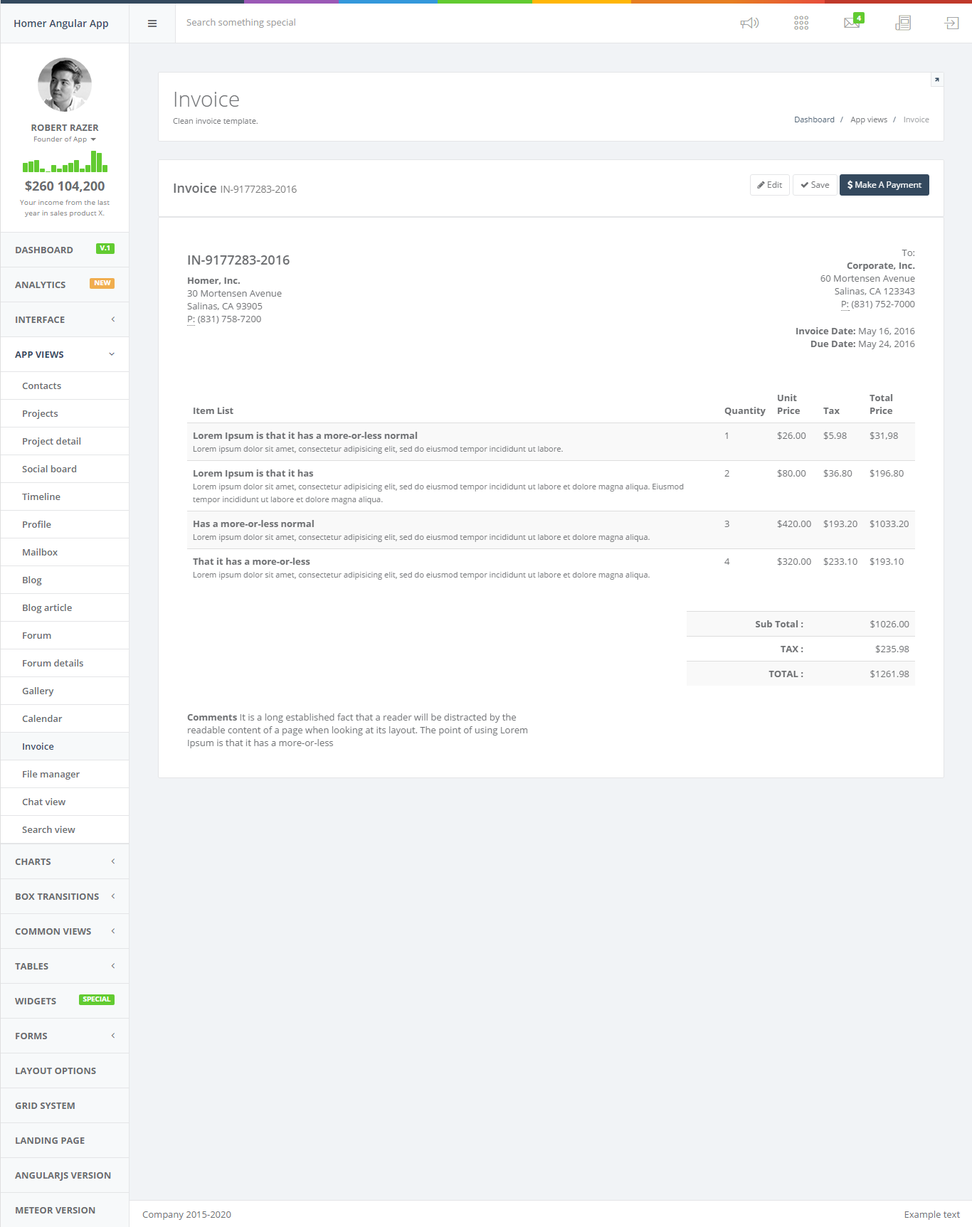
<style>
.page{position:relative;width:972px;height:1227px;background:#ffffff}
.page>*{position:absolute;margin:0}
.t1{font:7.1px "OpenSans-Bold"}
.t2{font:9.2px "OpenSans";color:#9c9999}
.t3{font:21.3px "OpenSans-Light"}
.t4{font:9.2px "OpenSans-Bold";color:#6a6c6f}
.t5{font:7.8px "OpenSans"}
.t6{font:7.1px "OpenSans";color:#a18cbf}
.t7{font:12.8px "OpenSans-Bold";color:#6a6c6f}
.t8{font:12.8px "OpenSans-Bold"}
.t9{font:9.2px "MyriadPro-Regular";color:#949698}
.t10{font:9.2px "MyriadPro-Regular"}
.t11{font:7.1px/10.7px "OpenSans"}
.t12{font:7.1px "OpenSans-Bold";font-weight:bold}
.t13{font:12.8px "OpenSans-Semibold";color:#676a6c}
.t14{font:9.2px/12.8px "OpenSans"}
.t15{font:9.2px/12.8px "OpenSans-Bold"}
.t16{font:9.2px "OpenSans-Bold"}
.t17{font:9.2px/12.8px "OpenSans-Bold";color:#676a6c}
.t18{font:9.2px/12.8px "OpenSans";color:#676a6c}
.t19{font:9.2px "OpenSans-Semibold"}
.t20{font:9.2px "OpenSans-Bold";color:#676a6c}
.t21{font:9.2px "OpenSans";color:#b2b3b5}
.t22{font:9.2px "OpenSans"}
.t23{font:9.2px "OpenSans";color:#909193}
.t24{font:9.2px "OpenSans";color:#96989a}
.t25{font:9.2px "OpenSans";color:#a5a6a8}
.t26{font:7.8px/12.8px "OpenSans"}
.t27{font:9.2px "OpenSans";color:#cacbcc}
.t28{font:9.2px "OpenSans";color:#676a6c}
</style>
<div class="page">
<p class="t1" style="left:856px;top:16px;width:4px;height:5px">4</p>
<p class="t2" style="left:186px;top:18px;width:109px;height:10px">Search something special</p>
<p class="t3" style="left:175px;top:91px;width:64px;height:16px">Invoice</p>
<p class="t4" style="left:31px;top:124px;width:68px;height:7px">ROBERT RAZER</p>
<p class="t5" style="left:174px;top:117px;width:84px;height:9px">Clean invoice template.</p>
<p class="t6" style="left:34px;top:136px;width:51px;height:8px">Founder of App</p>
<p class="t7" style="left:25px;top:181px;width:80px;height:11px">$260 104,200</p>
<p class="t8" style="left:172px;top:183px;width:45px;height:10px">Invoice</p>
<p class="t9" style="left:768px;top:181px;width:14px;height:7px">Edit</p>
<p class="t10" style="left:811px;top:181px;width:18px;height:7px">Save</p>
<p class="t10" style="left:855px;top:181px;width:63px;height:9px">Make a Paymant</p>
<p class="t11" style="left:21px;top:199px;width:86px;height:19px;text-align:center">Your income from the last<br>year in sales product X.</p>
<p class="t12" style="left:100px;top:245px;width:10px;height:7px">V.1</p>
<p class="t4" style="left:16px;top:246px;width:57px;height:8px">DASHBOARD</p>
<p class="t13" style="left:189px;top:255px;width:101px;height:10px">IN-9177283-2016</p>
<p class="t14" style="left:820px;top:249px;width:94px;height:60px;text-align:right">To:<br><span class="t15">Corporate, Inc.<br></span>60 Mortensen Avenue<br>Salinas, CA 123343<br>P: (831) 752-7000</p>
<p class="t4" style="left:14px;top:281px;width:51px;height:8px">ANALYTICS</p>
<p class="t12" style="left:94px;top:280px;width:17px;height:7px">NEW</p>
<p class="t14" style="left:188px;top:277px;width:94px;height:47px"><span class="t15">Homer, Inc.<br></span>30 Mortensen Avenue<br>Salinas, CA 93905<br>P: (831) 758-7200</p>
<p class="t16" style="left:16px;top:316px;width:48px;height:8px">INTERFACE</p>
<p class="t17" style="left:796px;top:327px;width:119px;height:22px;text-align:right">Invoice Date:<span class="t18"> May 16, 2016<br></span>Due Date:<span class="t18"> May 24, 2016</span></p>
<p class="t16" style="left:14px;top:351px;width:49px;height:8px">APP VIEWS</p>
<p class="t19" style="left:22px;top:382px;width:38px;height:8px">Contacts</p>
<p class="t17" style="left:777px;top:394px;width:23px;height:21px">Unit<br>Price</p>
<p class="t17" style="left:869px;top:394px;width:23px;height:21px">Total<br>Price</p>
<p class="t19" style="left:23px;top:410px;width:35px;height:9px">Projects</p>
<p class="t20" style="left:193px;top:407px;width:40px;height:8px">Item List</p>
<p class="t20" style="left:724px;top:407px;width:41px;height:9px">Quantity</p>
<p class="t20" style="left:823px;top:407px;width:16px;height:8px">Tax</p>
<p class="t19" style="left:23px;top:437px;width:57px;height:10px">Project detail</p>
<p class="t20" style="left:193px;top:432px;width:224px;height:9px">Lorem Ipsum is that it has a more-or-less normal</p>
<p class="t21" style="left:726px;top:432px;width:2px;height:7px">1</p>
<p class="t22" style="left:777px;top:432px;width:28px;height:8px">$26.00</p>
<p class="t23" style="left:823px;top:432px;width:24px;height:8px">$5.98</p>
<p class="t24" style="left:869px;top:432px;width:29px;height:8px">$31,98</p>
<p class="t5" style="left:193px;top:445px;width:368px;height:9px">Lorem ipsum dolor sit amet, consectetur adipisicing elit, sed do eiusmod tempor incididunt ut labore.</p>
<p class="t19" style="left:22px;top:465px;width:54px;height:8px">Social board</p>
<p class="t20" style="left:193px;top:470px;width:120px;height:9px">Lorem Ipsum is that it has</p>
<p class="t22" style="left:725px;top:470px;width:5px;height:7px">2</p>
<p class="t22" style="left:777px;top:470px;width:28px;height:7px">$80.00</p>
<p class="t22" style="left:823px;top:470px;width:29px;height:7px">$36.80</p>
<p class="t25" style="left:869px;top:470px;width:34px;height:7px">$196.80</p>
<p class="t26" style="left:193px;top:483px;width:488px;height:21px">Lorem ipsum dolor sit amet, consectetur adipisicing elit, sed do eiusmod tempor incididunt ut labore et dolore magna aliqua. Eiusmod <br>tempor incididunt ut labore et dolore magna aliqua.</p>
<p class="t19" style="left:22px;top:493px;width:38px;height:8px">Timeline</p>
<p class="t19" style="left:23px;top:521px;width:28px;height:8px">Profile</p>
<p class="t20" style="left:193px;top:520px;width:121px;height:8px">Has a more-or-less normal</p>
<p class="t27" style="left:725px;top:520px;width:5px;height:8px">3</p>
<p class="t22" style="left:777px;top:520px;width:33px;height:8px">$420.00</p>
<p class="t22" style="left:823px;top:520px;width:33px;height:8px">$193.20</p>
<p class="t22" style="left:869px;top:520px;width:39px;height:8px">$1033.20</p>
<p class="t5" style="left:193px;top:534px;width:455px;height:8px">Lorem ipsum dolor sit amet, consectetur adipisicing elit, sed do eiusmod tempor incididunt ut labore et dolore magna aliqua.</p>
<p class="t19" style="left:23px;top:548px;width:35px;height:8px">Mailbox</p>
<p class="t20" style="left:193px;top:558px;width:116px;height:8px">That it has a more-or-less</p>
<p class="t28" style="left:725px;top:558px;width:5px;height:7px">4</p>
<p class="t22" style="left:777px;top:558px;width:33px;height:8px">$320.00</p>
<p class="t22" style="left:823px;top:558px;width:33px;height:8px">$233.10</p>
<p class="t25" style="left:869px;top:558px;width:34px;height:8px">$193.10</p>
<p class="t19" style="left:23px;top:576px;width:18px;height:9px">Blog</p>
<p class="t5" style="left:193px;top:571px;width:455px;height:9px">Lorem ipsum dolor sit amet, consectetur adipisicing elit, sed do eiusmod tempor incididunt ut labore et dolore magna aliqua.</p>
<p class="t19" style="left:23px;top:604px;width:49px;height:9px">Blog article</p>
<p class="t20" style="left:755px;top:620px;width:48px;height:8px">Sub Total :</p>
<p class="t22" style="left:870px;top:620px;width:39px;height:8px">$1026.00</p>
<p class="t19" style="left:23px;top:632px;width:28px;height:8px">Forum</p>
<p class="t22" style="left:876px;top:645px;width:33px;height:8px">$235.98</p>
<p class="t19" style="left:23px;top:659px;width:60px;height:8px">Forum details</p>
<p class="t20" style="left:769px;top:670px;width:34px;height:8px">TOTAL :</p>
<p class="t22" style="left:870px;top:670px;width:39px;height:8px">$1261.98</p>
<p class="t19" style="left:22px;top:687px;width:31px;height:9px">Gallery</p>
<p class="t14" style="left:187px;top:714px;width:340px;height:34px"><span class="t15">Comments </span>It is a long established fact that a reader will be distracted by the readable content of a page when looking at its layout. The point of using Lorem Ipsum is that it has a more-or-less</p>
<p class="t19" style="left:22px;top:715px;width:40px;height:8px">Calendar</p>
<p class="t19" style="left:23px;top:743px;width:30px;height:7px">Invoice</p>
<p class="t19" style="left:23px;top:770px;width:57px;height:10px">File manager</p>
<p class="t19" style="left:22px;top:798px;width:43px;height:8px">Chat view</p>
<p class="t19" style="left:22px;top:826px;width:53px;height:8px">Search view</p>
<p class="t4" style="left:15px;top:858px;width:36px;height:8px">CHARTS</p>
<p class="t16" style="left:16px;top:893px;width:83px;height:8px">BOX TRANSITIONS</p>
<p class="t16" style="left:15px;top:928px;width:76px;height:7px">COMMON VIEWS</p>
<p class="t4" style="left:15px;top:962px;width:33px;height:8px">TABLES</p>
<p class="t4" style="left:14px;top:997px;width:42px;height:8px">WIDGETS</p>
<p class="t16" style="left:16px;top:1032px;width:31px;height:8px">FORMS</p>
<p class="t16" style="left:16px;top:1067px;width:80px;height:8px">LAYOUT OPTIONS</p>
<p class="t4" style="left:15px;top:1102px;width:60px;height:8px">GRID SYSTEM</p>
<p class="t16" style="left:16px;top:1137px;width:68px;height:8px">LANDING PAGE</p>
<p class="t16" style="left:14px;top:1172px;width:96px;height:9px">ANGULARJS VERSION</p>
<p class="t16" style="left:16px;top:1206px;width:79px;height:8px">METEOR VERSION</p>
<p class="t22" style="left:142px;top:1211px;width:89px;height:8px">Company 2015-2020</p>
<p class="t22" style="left:904px;top:1210px;width:56px;height:9px">Example text</p>
</div>
